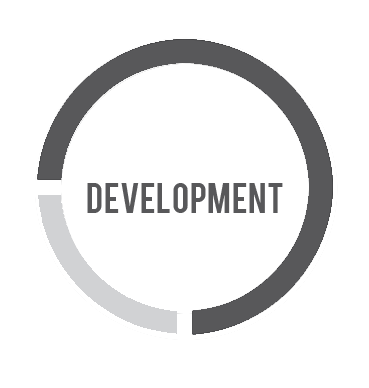
<style>
.page{position:relative;width:369px;height:388px;background:#ffffff}
.page>*{position:absolute;margin:0}
.t1{font:33.3px "Bebas";color:#58585a}
.t2{font:33.3px "Homestead-Display";color:#ffffff}
</style>
<div class="page">
<p class="t1" style="left:87px;top:149px;width:196px;height:64px;text-align:center"><span class="t2">Front-end<br></span>Development</p>
</div>
